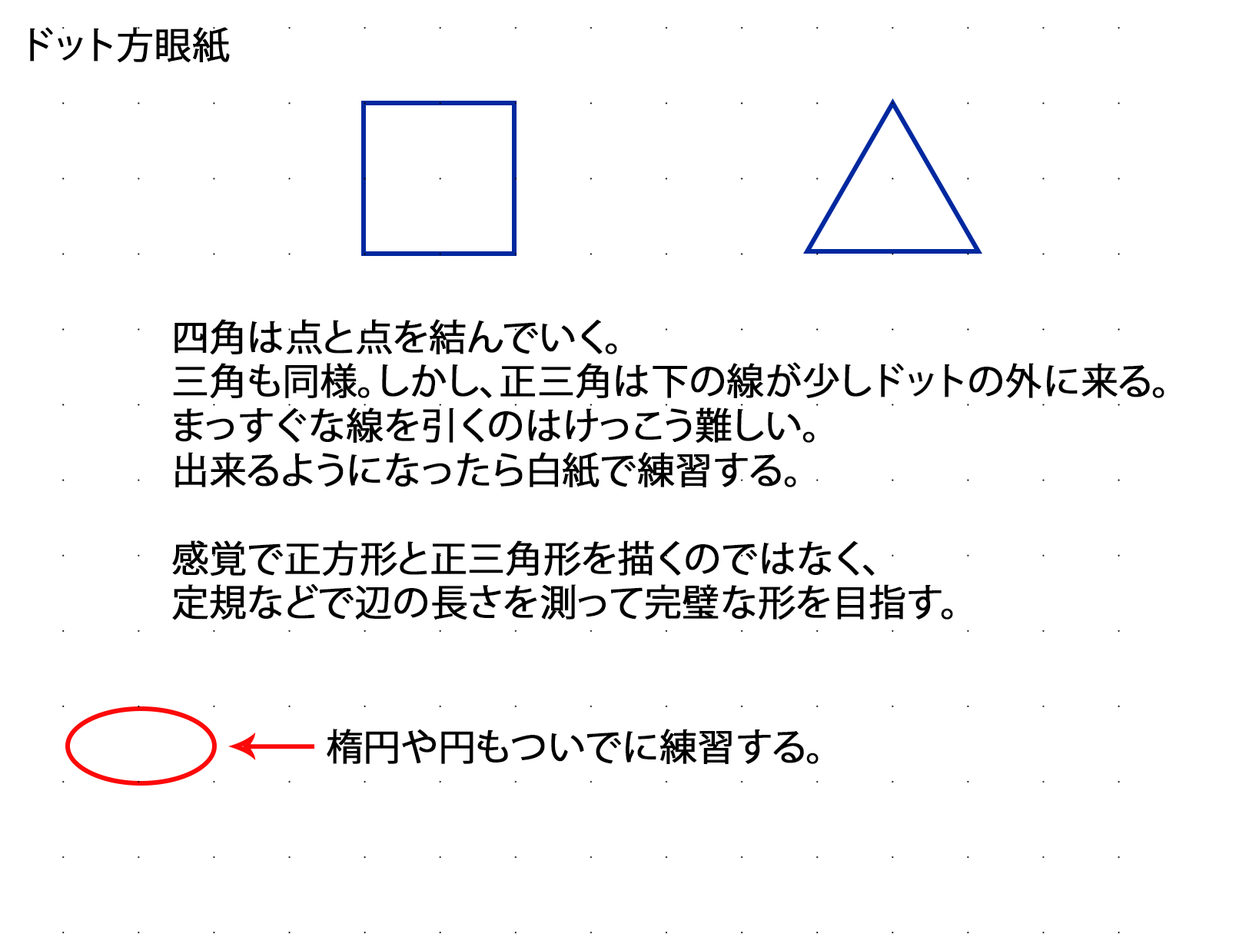
<style>
.page{position:relative;width:1259px;height:947px;background:#ffffff}
.page>*{position:absolute;margin:0}
.t1{font:36.9px "KozGoPr6N-Regular";color:#000000;font-weight:bold}
</style>
<div class="page">
<p class="t1" style="left:30px;top:27px;width:200px;height:35px">ドット方眼紙</p>
<p class="t1" style="left:172px;top:319px;width:993px;height:301px">四角は点と点を結んでいく。<br>三角も同様。しかし、正三角は下の線が少しドットの外に来る。<br>まっすぐな線を引くのはけっこう難しい。<br>出来るようになったら白紙で練習する。<br><br>感覚で正方形と正三角形を描くのではなく、<br>定規などで辺の長さを測って完璧な形を目指す。</p>
<p class="t1" style="left:327px;top:729px;width:492px;height:35px">楕円や円もついでに練習する。</p>
</div>
